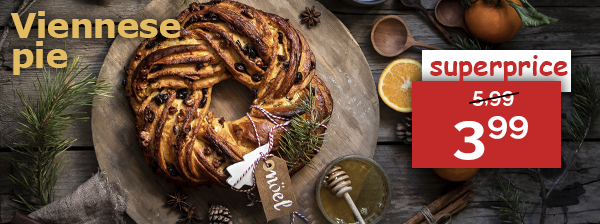
<style>
.page{position:relative;width:600px;height:224px}
.page>*{position:absolute;margin:0}
.t1{font:35px/30px "Tahoma-Bold";color:#e3bb63;scale:1.06 1}
.t2{font:27.9px "ComicSansMS-Bold";color:#c12a29}
.t3{font:21.4px "Raleway-Bold";color:#ffffff}
.t4{font:54.1px "Raleway-Bold";color:#ffffff;scale:1.14 1}
</style>
<div class="page">
<p class="t1" style="left:10px;top:11px;width:171px;height:64px">Viennese <br>pie</p>
<p class="t2" style="left:430px;top:55px;width:138px;height:28px">superprice</p>
<p class="t3" style="left:472px;top:91px;width:42px;height:15px">5,99</p>
<p class="t4" style="left:453px;top:116px;width:75px;height:44px">399</p>
</div>
